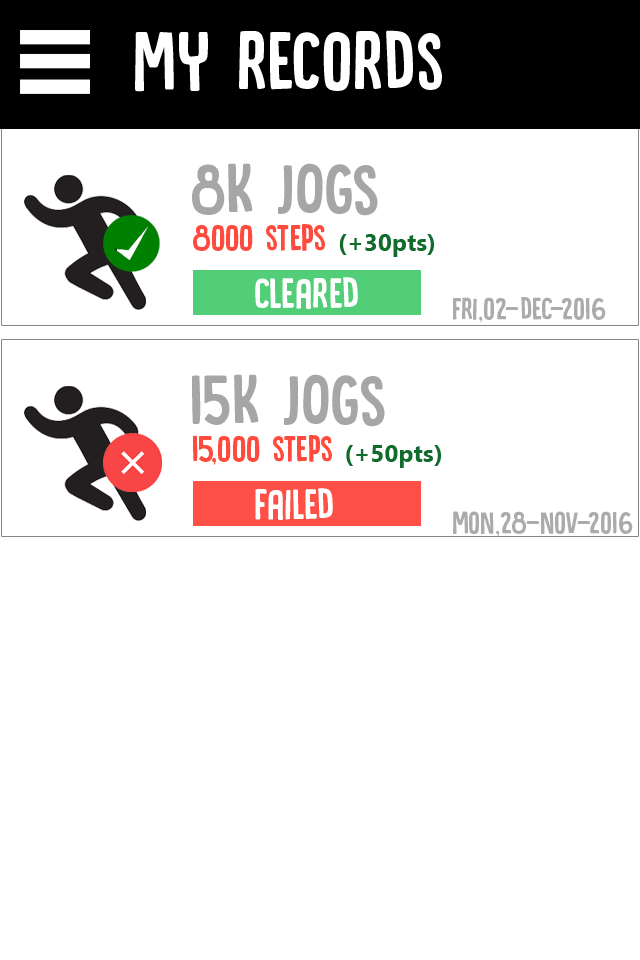
<style>
.page{position:relative;width:640px;height:960px;background:#ffffff}
.page>*{position:absolute;margin:0}
.t1{font:86.6px "DKCanoodle-Regular";color:#ffffff}
.t2{font:74.5px "DKCanoodle-Regular";color:#a6a6a6}
.t3{font:38.9px "DKCanoodle-Regular";color:#ff4b3d}
.t4{font:24.3px "Ebrima-Bold";color:#106b2c}
.t5{font:45.2px "DKCanoodle-Regular";color:#ffffff}
.t6{font:32.7px "DKCanoodle-Regular";color:#ababab}
</style>
<div class="page">
<p class="t1" style="left:135px;top:30px;width:307px;height:62px">my records</p>
<p class="t2" style="left:192px;top:163px;width:186px;height:53px">8k JOGS</p>
<p class="t3" style="left:193px;top:224px;width:241px;height:33px">8000 steps <span class="t4">(+30pts)</span></p>
<p class="t5" style="left:255px;top:277px;width:103px;height:32px">cleared</p>
<p class="t6" style="left:453px;top:297px;width:153px;height:26px">fri,02-dec-2016</p>
<p class="t2" style="left:192px;top:374px;width:193px;height:53px">15k JOGS</p>
<p class="t3" style="left:193px;top:435px;width:248px;height:33px">15,000 steps <span class="t4">(+50pts)</span></p>
<p class="t5" style="left:255px;top:488px;width:78px;height:32px">failed</p>
<p class="t6" style="left:453px;top:511px;width:180px;height:26px">mon,28-nov-2016</p>
</div>
